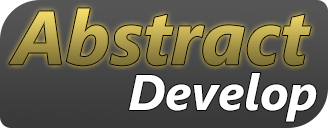
<style>
.page{position:relative;width:328px;height:128px}
.page>*{position:absolute;margin:0}
.t1{font:75.2px "SegoeUI-BoldItalic"}
.t2{font:50.1px "SegoeUI-BoldItalic";color:#ffffff}
</style>
<div class="page">
<p class="t1" style="left:9px;top:8px;width:302px;height:58px">Abstract</p>
<p class="t2" style="left:129px;top:73px;width:188px;height:49px">Develop</p>
</div>
